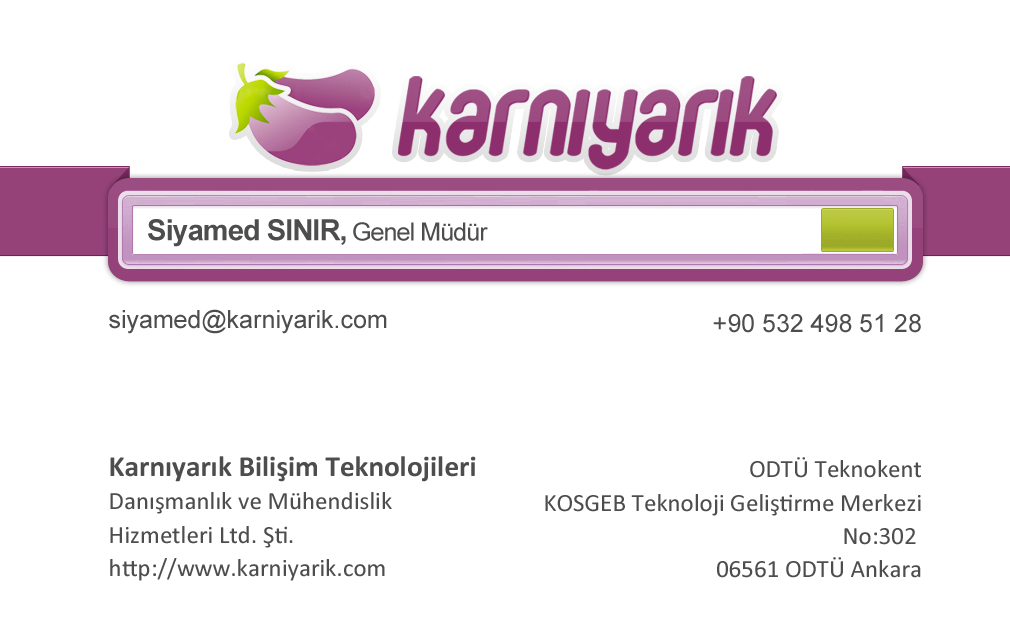
<style>
.page{position:relative;width:1010px;height:637px;background:#ffffff}
.page>*{position:absolute;margin:0}
.t1{font:29.1px "Arial-BoldMT";letter-spacing:-0.035em;color:#4d4d4d}
.t2{font:25px "ArialMT";letter-spacing:-0.035em;color:#4d4d4d}
.t3{font:25px "ArialMT";color:#4d4d4d}
.t4{font:25px/33.3px "Calibri";color:#4d4d4d}
.t5{font:29.1px/33.3px "Calibri-Bold";color:#4d4d4d}
</style>
<div class="page">
<p class="t1" style="left:148px;top:219px;width:198px;height:28px">Siyamed SINIR,</p>
<p class="t2" style="left:353px;top:222px;width:135px;height:19px">Genel Müdür</p>
<p class="t3" style="left:109px;top:309px;width:278px;height:25px">siyamed@karniyarik.com</p>
<p class="t3" style="left:713px;top:314px;width:208px;height:19px">+90 532 498 51 28</p>
<p class="t4" style="left:110px;top:456px;width:366px;height:125px"><span class="t5">Karnıyarık Bilişim Teknolojileri<br></span>Danışmanlık ve Mühendislik <br>Hizmetleri Ltd. Şti.<br>http://www.karniyarik.com</p>
<p class="t4" style="left:545px;top:457px;width:376px;height:121px;text-align:right">ODTÜ Teknokent<br>KOSGEB Teknoloji Geliştirme Merkezi<br>No:302 <br>06561 ODTÜ Ankara</p>
</div>
